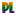
<style>
.page{position:relative;width:16px;height:16px;background:#ffffff}
.page>*{position:absolute;margin:0}
.t1{font:14.7px "ShowcardGothic-Reg";scale:0.72 1}
</style>
<div class="page">
<p class="t1" style="left:2px;top:2px;width:13px;height:11px">PL</p>
</div>
